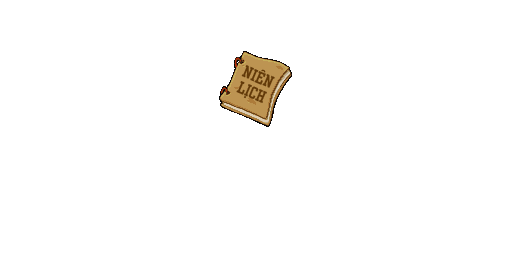
<style>
.page{position:relative;width:512px;height:256px;background:#ffffff}
.page>*{position:absolute;margin:0}
.t1{font:13.8px "SVN-Zero";color:#633a08}
</style>
<div class="page">
<p class="t1" style="left:236px;top:65px;width:39px;height:38px;text-align:center;rotate:23deg">Niên<br>Lịch</p>
</div>
